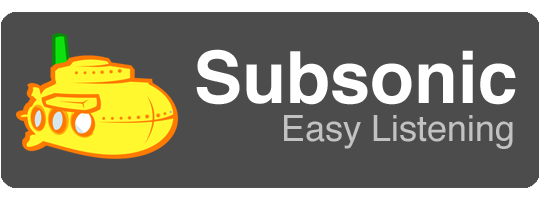
<style>
.page{position:relative;width:540px;height:200px;background:#4c4c4c}
.page>*{position:absolute;margin:0}
.t1{font:72px "Helvetica-Bold";color:#ffffff}
.t2{font:36px "Helvetica";color:#c2c2c2}
</style>
<div class="page">
<p class="t1" style="left:196px;top:49px;width:320px;height:56px">Subsonic</p>
<p class="t2" style="left:284px;top:115px;width:229px;height:34px">Easy Listening</p>
</div>
